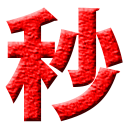
<style>
.page{position:relative;width:128px;height:128px;background:#ffffff}
.page>*{position:absolute;margin:0}
.t1{font:120px "KozGoPro-Heavy"}
</style>
<div class="page">
<p class="t1" style="left:5px;top:7px;width:118px;height:115px">秒</p>
</div>
